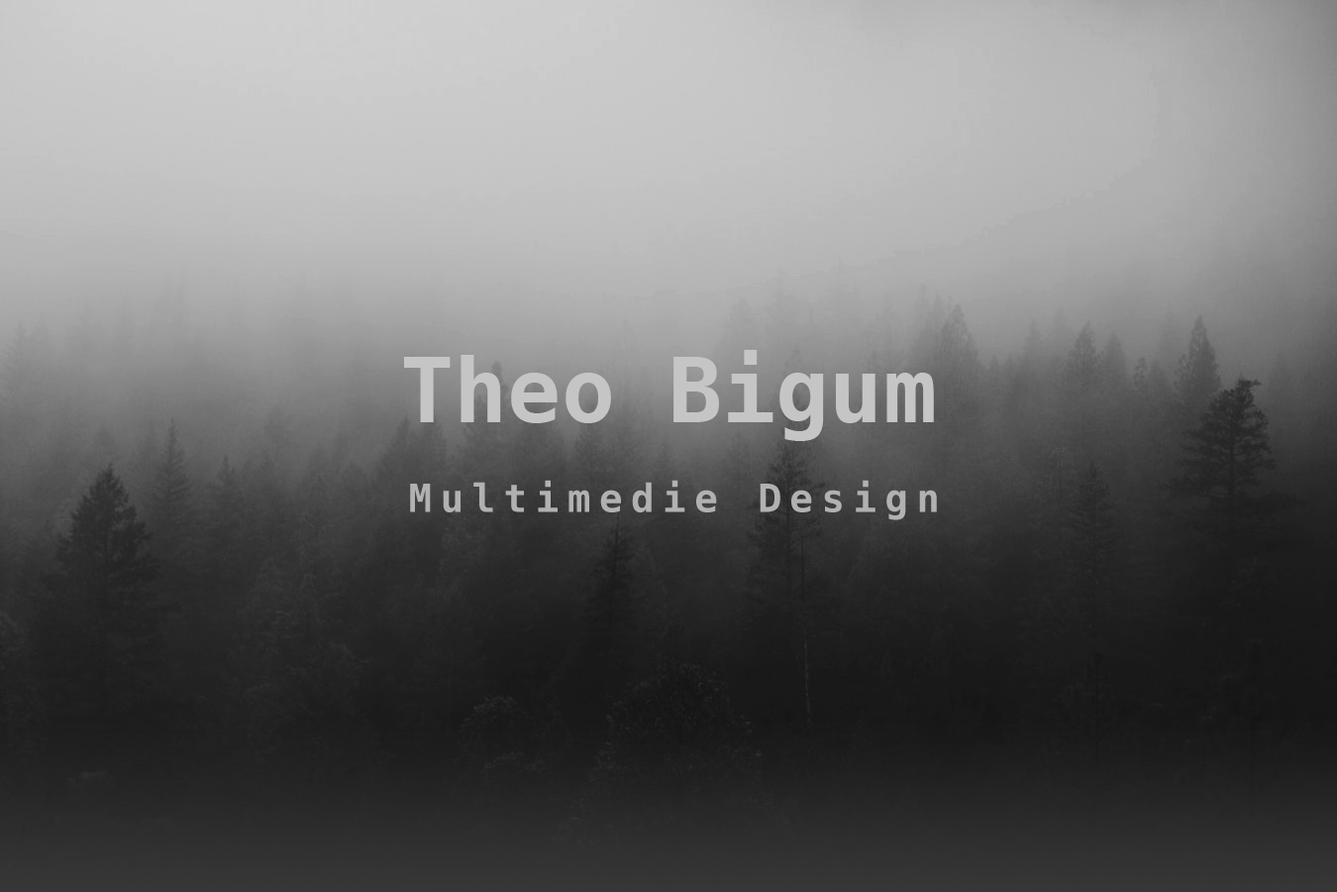
<style>
.page{position:relative;width:1337px;height:892px}
.page>*{position:absolute;margin:0}
.t1{font:89.2px "Menlo-Bold";color:#c5c5c5}
.t2{font:38.6px "Menlo-Bold";letter-spacing:0.22em;color:#b1b1b1}
</style>
<div class="page">
<p class="t1" style="left:404px;top:350px;width:530px;height:91px">Theo Bigum</p>
<p class="t2" style="left:410px;top:479px;width:527px;height:41px">Multimedie Design</p>
</div>
